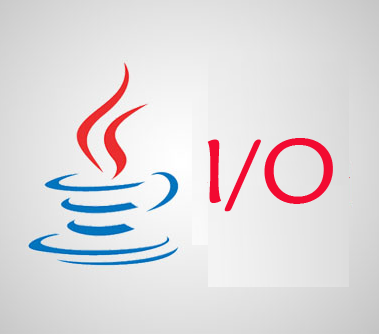
<style>
.page{position:relative;width:379px;height:334px}
.page>*{position:absolute;margin:0}
.t1{font:90px "STXinwei";color:#f20a31}
</style>
<div class="page">
<p class="t1" style="left:207px;top:138px;width:126px;height:74px">I/O</p>
</div>
